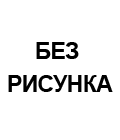
<style>
.page{position:relative;width:120px;height:140px;background:#ffffff}
.page>*{position:absolute;margin:0}
.t1{font:23.4px/11.7px "Arial-BoldMT";letter-spacing:-0.04em;color:#000000}
</style>
<div class="page">
<p class="t1" style="left:8px;top:42px;width:105px;height:50px;text-align:center">БЕЗ <br><br>РИСУНКА</p>
</div>
